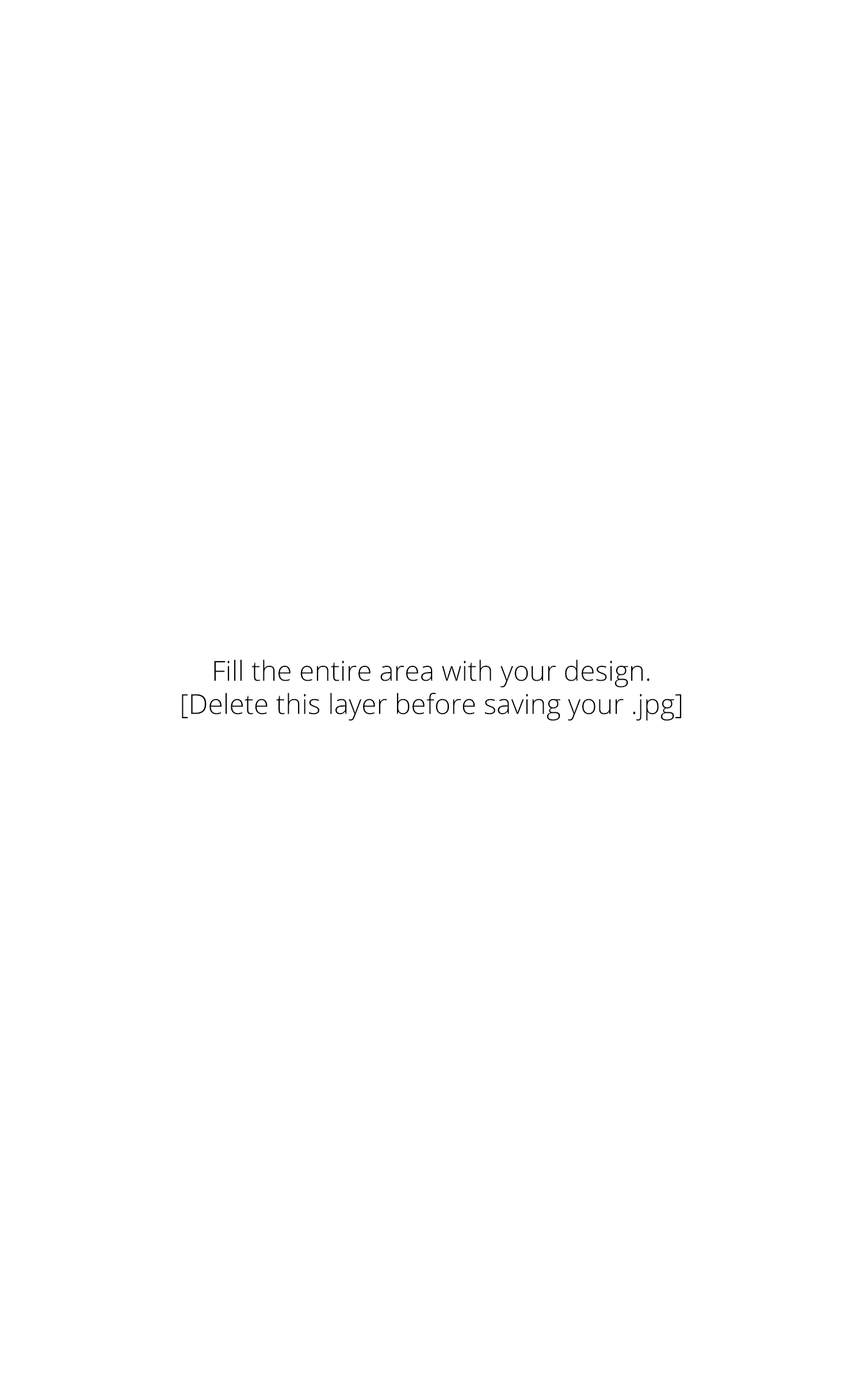
<style>
.page{position:relative;width:863px;height:1381px;background:#ffffff}
.page>*{position:absolute;margin:0}
.t1{font:27.6px "OpenSans-Light";color:#000000}
</style>
<div class="page">
<p class="t1" style="left:182px;top:660px;width:499px;height:61px;text-align:center">Fill the entire area with your design.<br>[Delete this layer before saving your .jpg]</p>
</div>
